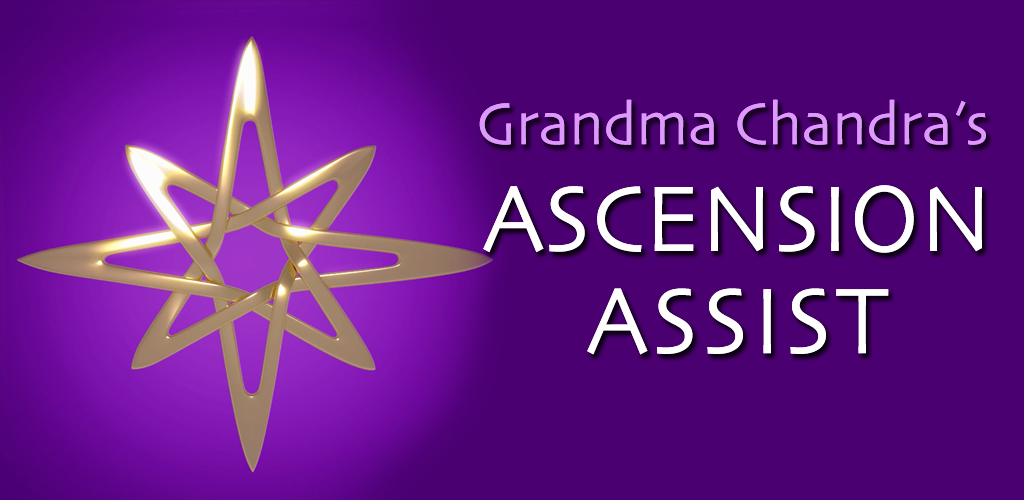
<style>
.page{position:relative;width:1024px;height:500px;background:#4a0071}
.page>*{position:absolute;margin:0}
.t1{font:62.2px "Skia-Regular";color:#dd98fd;scale:0.95 1}
.t2{font:97.7px/102.3px "Skia-Regular";color:#ffffff;scale:0.95 1}
.t3{font:97.7px/102.3px "Skia-Regular";letter-spacing:0.04em;color:#ffffff;scale:0.95 1}
</style>
<div class="page">
<p class="t1" style="left:479px;top:99px;width:507px;height:46px">Grandma Chandra’s</p>
<p class="t1" style="left:479px;top:99px;width:507px;height:46px">Grandma Chandra’s</p>
<p class="t2" style="left:483px;top:185px;width:499px;height:170px;text-align:center">ASCENSION<br><span class="t3">ASSIST</span></p>
<p class="t2" style="left:483px;top:185px;width:499px;height:170px;text-align:center">ASCENSION<br><span class="t3">ASSIST</span></p>
</div>
